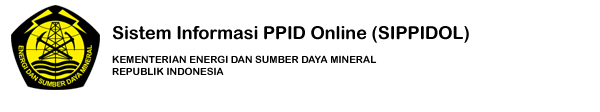
<style>
.page{position:relative;width:600px;height:112px;background:#ffffff}
.page>*{position:absolute;margin:0}
.t1{font:10px "ArialRoundedMTBold";color:#000000}
.t2{font:18px "ArialRoundedMTBold";color:#000000}
</style>
<div class="page">
<p class="t1" style="left:112px;top:26px;width:357px;height:49px"><span class="t2">Sistem Informasi PPID Online (SIPPIDOL)<br></span><br>KEMENTERIAN ENERGI DAN SUMBER DAYA MINERAL<br>REPUBLIK INDONESIA</p>
</div>
